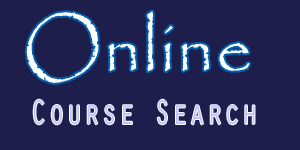
<style>
.page{position:relative;width:300px;height:150px;background:#1e1e4c}
.page>*{position:absolute;margin:0}
.t1{font:72px "Papyrus-Regular";letter-spacing:0.03em;color:#ffffff}
.t2{font:36px "OratorStd";letter-spacing:0.03em;color:#c2c2fe;scale:0.78 1}
</style>
<div class="page">
<p class="t1" style="left:26px;top:11px;width:224px;height:72px">Online</p>
<p class="t2" style="left:33px;top:99px;width:222px;height:26px">Course Search</p>
</div>
